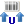
<style>
.page{position:relative;width:24px;height:24px;background:#ffffff}
.page>*{position:absolute;margin:0}
.t1{font:10px "Tahoma-Bold";color:#1304a3}
</style>
<div class="page">
<p class="t1" style="left:9px;top:17px;width:6px;height:7px">U</p>
</div>
